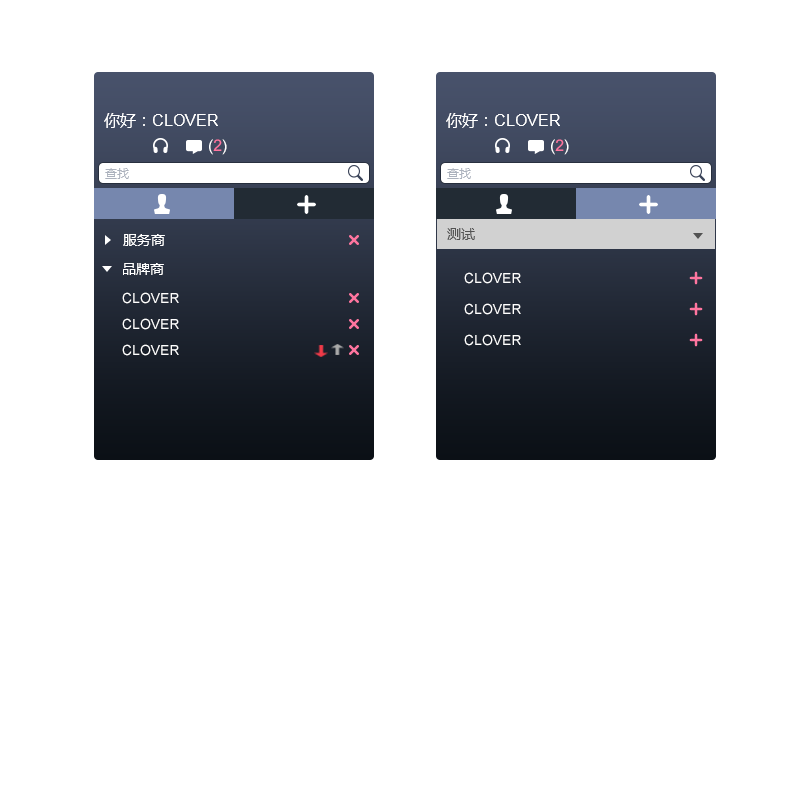
<style>
.page{position:relative;width:800px;height:800px;background:#ffffff}
.page>*{position:absolute;margin:0}
.t1{font:16px "ArialMT";color:#ffffff}
.t2{font:16px "MicrosoftYaHei";color:#ffffff}
.t3{font:16px "ArialMT";color:#ff759f}
.t4{font:12px "MicrosoftYaHei";color:#acb2bd}
.t5{font:14px "MicrosoftYaHei";color:#525252}
.t6{font:14px "MicrosoftYaHei";color:#ffffff}
.t7{font:14px "ArialMT";color:#ffffff}
</style>
<div class="page">
<p class="t1" style="left:104px;top:113px;width:114px;height:15px"><span class="t2">你好：</span>CLOVER</p>
<p class="t1" style="left:446px;top:113px;width:114px;height:15px"><span class="t2">你好：</span>CLOVER</p>
<p class="t1" style="left:209px;top:139px;width:18px;height:16px">(<span class="t3">2</span>)</p>
<p class="t1" style="left:551px;top:139px;width:18px;height:16px">(<span class="t3">2</span>)</p>
<p class="t4" style="left:105px;top:168px;width:24px;height:11px">查找</p>
<p class="t4" style="left:447px;top:168px;width:24px;height:11px">查找</p>
<p class="t5" style="left:447px;top:228px;width:28px;height:12px">测试</p>
<p class="t6" style="left:123px;top:234px;width:42px;height:12px">服务商</p>
<p class="t6" style="left:123px;top:263px;width:41px;height:12px">品牌商</p>
<p class="t7" style="left:464px;top:272px;width:57px;height:12px">CLOVER</p>
<p class="t7" style="left:122px;top:292px;width:57px;height:12px">CLOVER</p>
<p class="t7" style="left:464px;top:303px;width:57px;height:12px">CLOVER</p>
<p class="t7" style="left:122px;top:318px;width:57px;height:12px">CLOVER</p>
<p class="t7" style="left:464px;top:334px;width:57px;height:12px">CLOVER</p>
<p class="t7" style="left:122px;top:344px;width:57px;height:12px">CLOVER</p>
</div>
